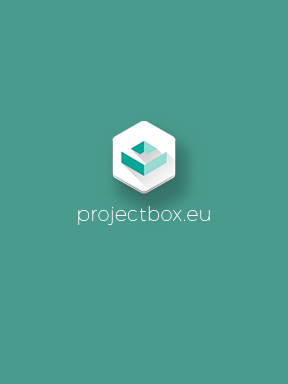
<style>
.page{position:relative;width:288px;height:384px;background:#499b8d}
.page>*{position:absolute;margin:0}
.t1{font:20.1px "Montserrat-Thin";letter-spacing:0.025em;color:#f8f8f8}
</style>
<div class="page">
<p class="t1" style="left:78px;top:206px;width:132px;height:19px">projectbox.eu</p>
</div>
